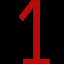
<style>
.page{position:relative;width:64px;height:64px;background:#000000}
.page>*{position:absolute;margin:0}
.t1{font:88px "MKSansTallX";color:#ba0a0a}
</style>
<div class="page">
<p class="t1" style="left:19px;top:0px;width:31px;height:64px">1</p>
</div>
